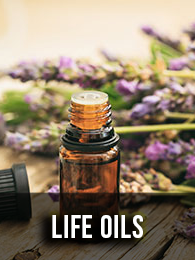
<style>
.page{position:relative;width:195px;height:260px}
.page>*{position:absolute;margin:0}
.t1{font:32px "BebasNeue-Regular";letter-spacing:0.025em;color:#ffffff}
</style>
<div class="page">
<p class="t1" style="left:52px;top:215px;width:91px;height:23px">Life Oils</p>
</div>
